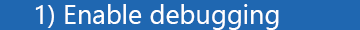
<style>
.page{position:relative;width:360px;height:30px;background:#1f67b1}
.page>*{position:absolute;margin:0}
.t1{font:27px "SegoeUI";color:#ffffff}
</style>
<div class="page">
<p class="t1" style="left:35px;top:4px;width:244px;height:26px">1) Enable debugging</p>
</div>
